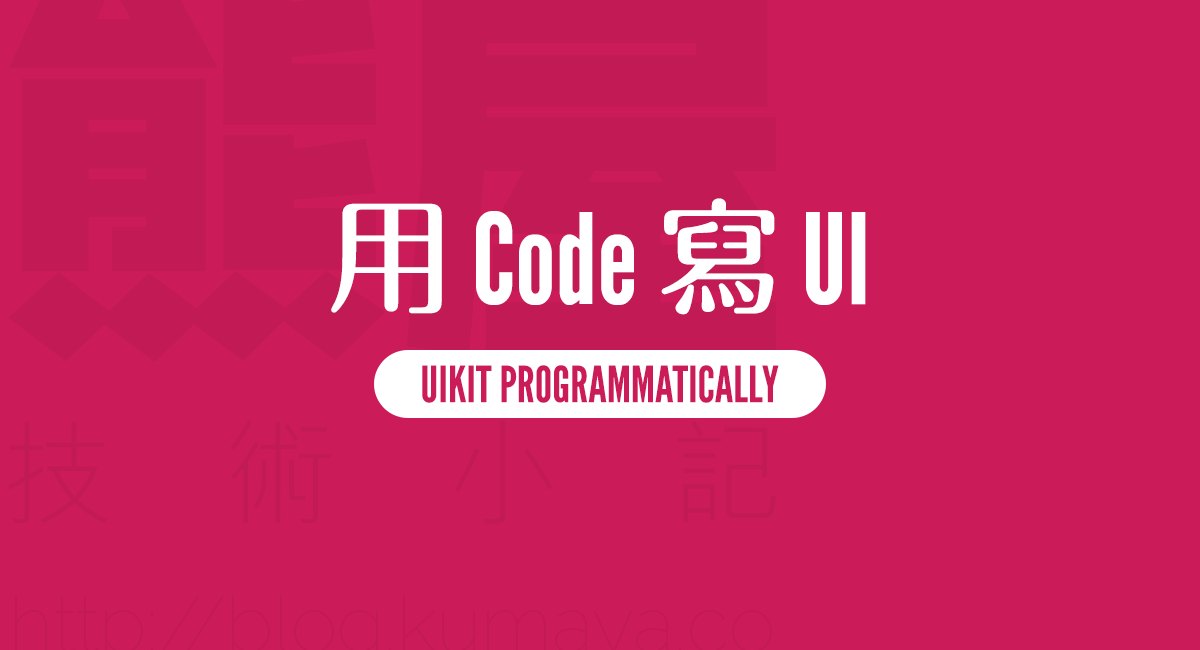
<style>
.page{position:relative;width:1200px;height:650px;background:#cc1b59}
.page>*{position:absolute;margin:0}
.t1{font:125px "LeagueGothic-Regular";color:#ffffff}
.t2{font:125px "MaruFoPro-Medium";color:#ffffff}
.t3{font:50px "LeagueGothic-Regular";color:#cc1b59;text-transform:uppercase}
</style>
<div class="page">
<p class="t1" style="left:331px;top:198px;width:535px;height:117px"><span class="t2">用</span> Code <span class="t2">寫</span> UI</p>
<p class="t3" style="left:422px;top:365px;width:357px;height:38px">UIKit Programmatically</p>
</div>
